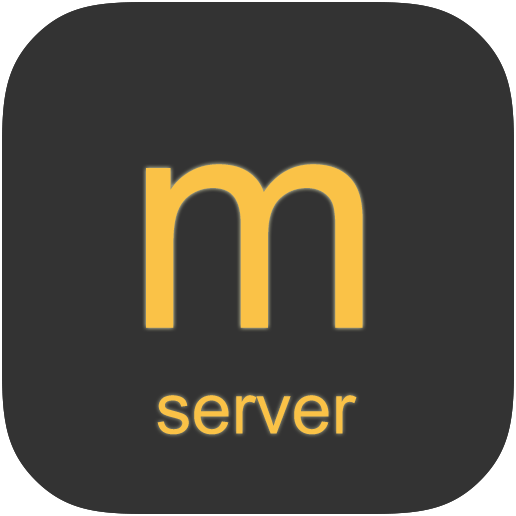
<style>
.page{position:relative;width:516px;height:516px;background:#333333}
.page>*{position:absolute;margin:0}
.t1{font:307.8px "Revit_HEB_DWG";color:#fac247}
.t2{font:72px "Revit_HEB_DWG";color:#fac247}
</style>
<div class="page">
<p class="t1" style="left:146px;top:164px;width:217px;height:164px">m</p>
<p class="t2" style="left:157px;top:395px;width:200px;height:40px">server</p>
</div>
